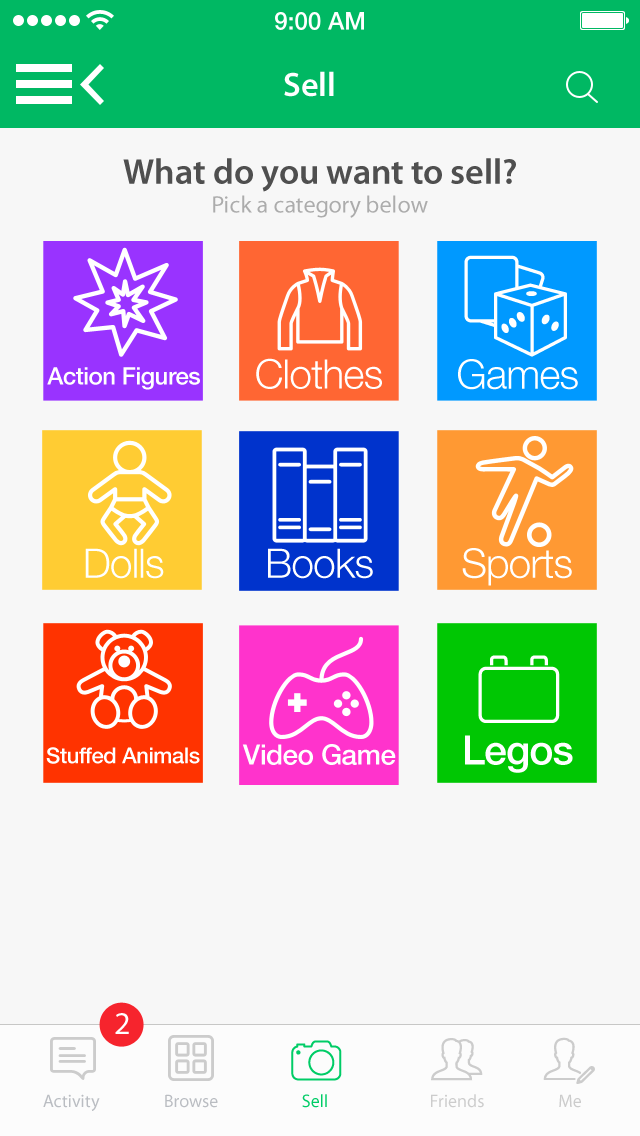
<style>
.page{position:relative;width:640px;height:1136px;background:#f7f7f7}
.page>*{position:absolute;margin:0}
.t1{font:34px "MyriadPro-Semibold";color:#ffffff}
.t2{font:36px "MyriadPro-Semibold";color:#4f4f4f}
.t3{font:24px "MyriadPro-Regular";color:#acacac}
.t4{font:40.7px "HelveticaNeue-Light";letter-spacing:-0.02em;color:#ffffff}
.t5{font:24px/19.3px "HelveticaNeue-Medium";letter-spacing:-0.02em;color:#ffffff}
.t6{font:40.7px "HelveticaNeue-Medium";letter-spacing:-0.02em;color:#ffffff}
.t7{font:22px "HelveticaNeue-Medium";letter-spacing:-0.02em;color:#ffffff}
.t8{font:28px "HelveticaNeue-Medium";letter-spacing:-0.02em;color:#ffffff}
.t9{font:32px "MyriadPro-Regular";letter-spacing:0.01em;color:#ffffff}
.t10{font:18px "MyriadPro-Regular";color:#babdc2}
.t11{font:18px "MyriadPro-Regular";color:#00cc66}
.t12{font:18px "MyriadPro-Regular";color:#cccccc}
</style>
<div class="page">
<p class="t1" style="left:284px;top:71px;width:50px;height:26px">Sell</p>
<p class="t2" style="left:123px;top:158px;width:393px;height:60px;text-align:center">What do you want to sell?<br><span class="t3">Pick a category below</span></p>
<p class="t4" style="left:256px;top:358px;width:126px;height:31px">Clothes</p>
<p class="t4" style="left:458px;top:359px;width:120px;height:31px">Games</p>
<p class="t5" style="left:47px;top:367px;width:153px;height:23px;text-align:center">Action Figures<br>A</p>
<p class="t4" style="left:85px;top:548px;width:79px;height:31px">Dolls</p>
<p class="t4" style="left:268px;top:548px;width:105px;height:31px">Books</p>
<p class="t4" style="left:462px;top:548px;width:110px;height:38px">Sports</p>
<p class="t6" style="left:465px;top:735px;width:108px;height:38px">Legos</p>
<p class="t7" style="left:46px;top:747px;width:154px;height:17px">Stuffed Animals</p>
<p class="t8" style="left:242px;top:744px;width:154px;height:21px">Video Game</p>
<p class="t9" style="left:115px;top:1013px;width:14px;height:21px">2</p>
<p class="t10" style="left:43px;top:1094px;width:57px;height:17px">Activity</p>
<p class="t10" style="left:165px;top:1094px;width:53px;height:14px">Browse</p>
<p class="t11" style="left:302px;top:1094px;width:25px;height:14px">Sell</p>
<p class="t12" style="left:431px;top:1094px;width:53px;height:14px">Friends</p>
<p class="t12" style="left:559px;top:1094px;width:22px;height:14px">Me</p>
</div>
